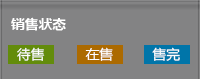
<style>
.page{position:relative;width:200px;height:79px;background:#838384}
.page>*{position:absolute;margin:0}
.t1{font:13.4px "MicrosoftYaHei-Bold";color:#ffffff}
.t2{font:13.4px "MicrosoftYaHei";color:#ffffff}
</style>
<div class="page">
<p class="t1" style="left:11px;top:17px;width:55px;height:14px">销售状态</p>
<p class="t2" style="left:17px;top:47px;width:28px;height:14px">待售</p>
<p class="t2" style="left:85px;top:47px;width:28px;height:14px">在售</p>
<p class="t2" style="left:152px;top:47px;width:28px;height:14px">售完</p>
</div>
